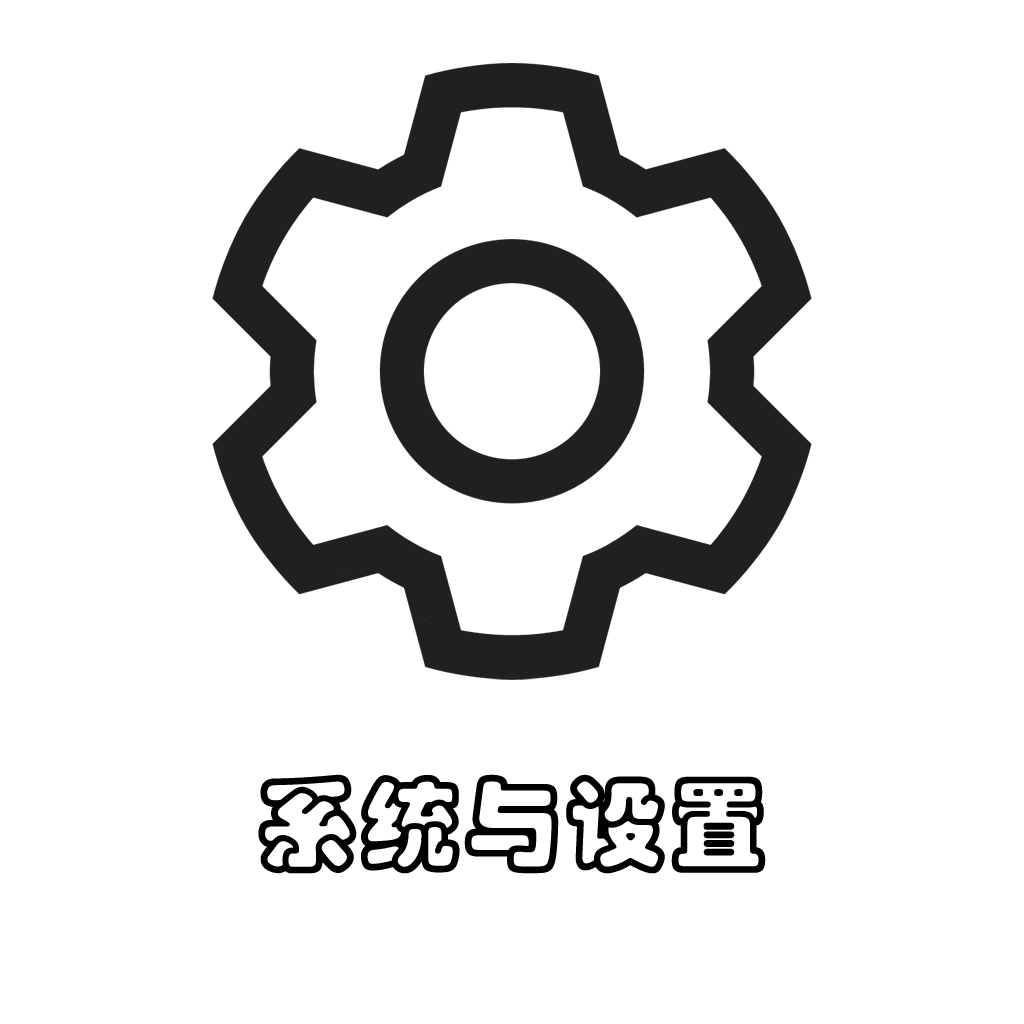
<style>
.page{position:relative;width:1024px;height:1024px;background:#ffffff}
.page>*{position:absolute;margin:0}
.t1{font:100px "STCaiyun";color:#000000;font-weight:bold}
</style>
<div class="page">
<p class="t1" style="left:258px;top:774px;width:508px;height:100px">系统与设置</p>
</div>
